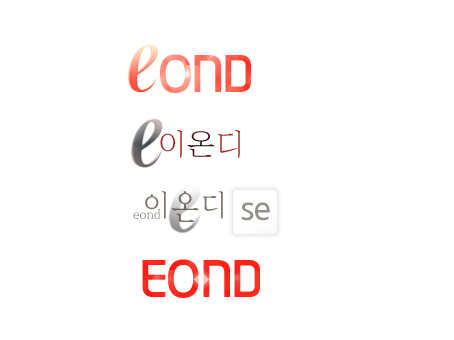
<style>
.page{position:relative;width:454px;height:340px;background:#ffffff}
.page>*{position:absolute;margin:0}
.t1{font:52.8px "InterGTB";letter-spacing:-0.05em;scale:0.91 1}
.t2{font:30px "Jabmlv50";letter-spacing:0.05em}
.t3{font:33px "YDIYMjO220";letter-spacing:0.05em;color:#7e766c;scale:0.91 1}
.t4{font:14.3px "YDIYMjO220";color:#898279;scale:0.91 1}
.t5{font:33px "10X10";color:#979088;scale:0.91 1}
.t6{font:52.8px "InterGTB";letter-spacing:-0.05em;color:#ff281f;scale:0.91 1}
</style>
<div class="page">
<p class="t1" style="left:159px;top:54px;width:92px;height:39px">OND</p>
<p class="t2" style="left:160px;top:130px;width:80px;height:28px">이온디</p>
<p class="t3" style="left:145px;top:191px;width:78px;height:31px">이온디</p>
<p class="t4" style="left:133px;top:209px;width:27px;height:10px">eond</p>
<p class="t5" style="left:241px;top:202px;width:29px;height:19px">se</p>
<p class="t6" style="left:142px;top:259px;width:118px;height:39px">EOND</p>
</div>
